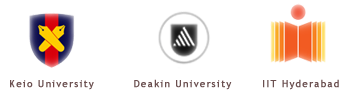
<style>
.page{position:relative;width:356px;height:96px;background:#ffffff}
.page>*{position:absolute;margin:0}
.t1{font:9.6px "TrebuchetMS";letter-spacing:0.12em;color:#6b5050;font-weight:bold}
</style>
<div class="page">
<p class="t1" style="left:10px;top:79px;width:329px;height:11px">Keio University         Deakin University       IIT Hyderabad</p>
</div>
